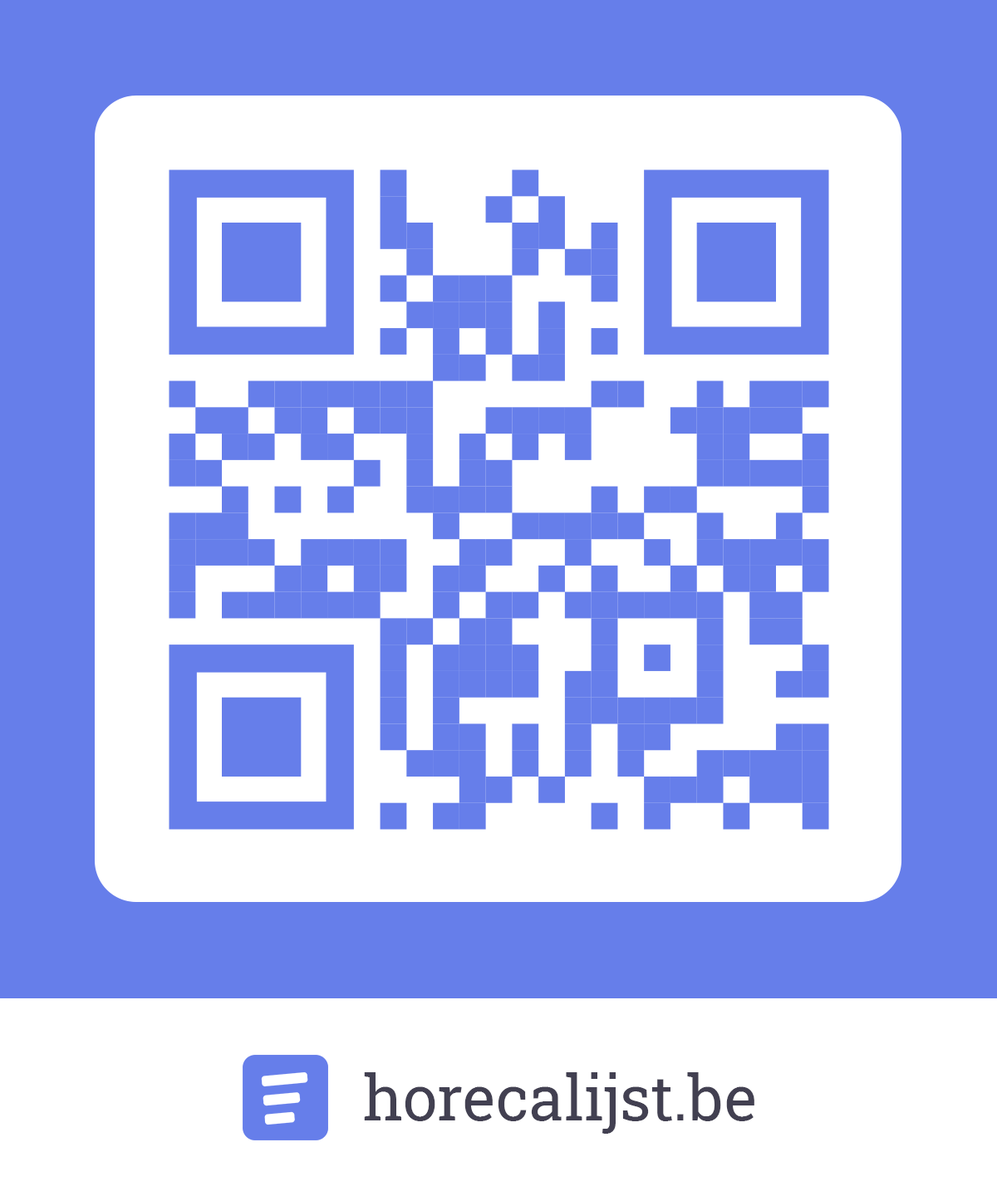
<style>
.page{position:relative;width:997px;height:1196px;background:#ffffff}
.page>*{position:absolute;margin:0}
.t1{font:62.7px "RobotoSlab-Regular";color:#424051}
</style>
<div class="page">
<p class="t1" style="left:364px;top:1072px;width:390px;height:62px">horecalijst.be</p>
</div>
